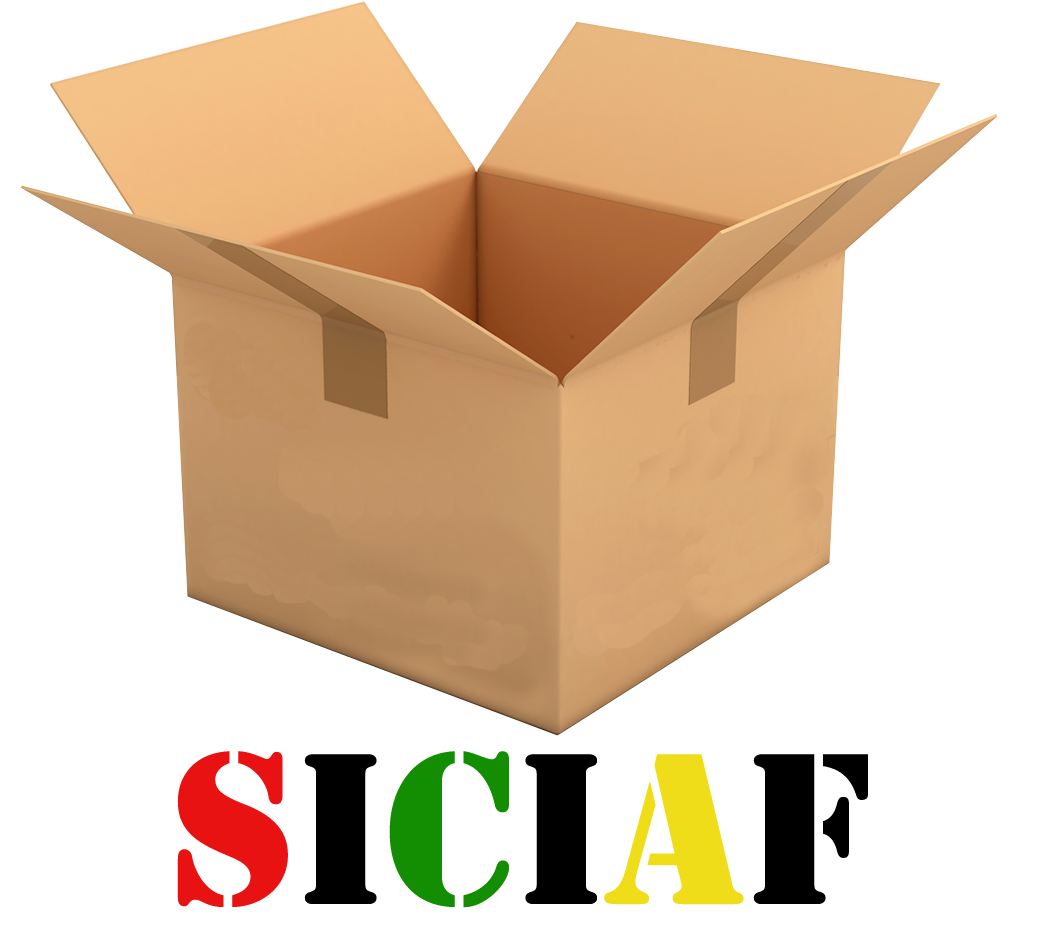
<style>
.page{position:relative;width:1037px;height:930px;background:#ffffff}
.page>*{position:absolute;margin:0}
.t1{font:200px "StencilStd";color:#e81212}
.t2{font:200px "StencilStd";color:#000000}
.t3{font:200px "StencilStd";color:#138d02}
.t4{font:200px "StencilStd";color:#efdd19}
</style>
<div class="page">
<p class="t1" style="left:177px;top:751px;width:691px;height:157px">S<span class="t2">I</span><span class="t3">C</span><span class="t2">I</span><span class="t4">A</span><span class="t2">F</span></p>
</div>
